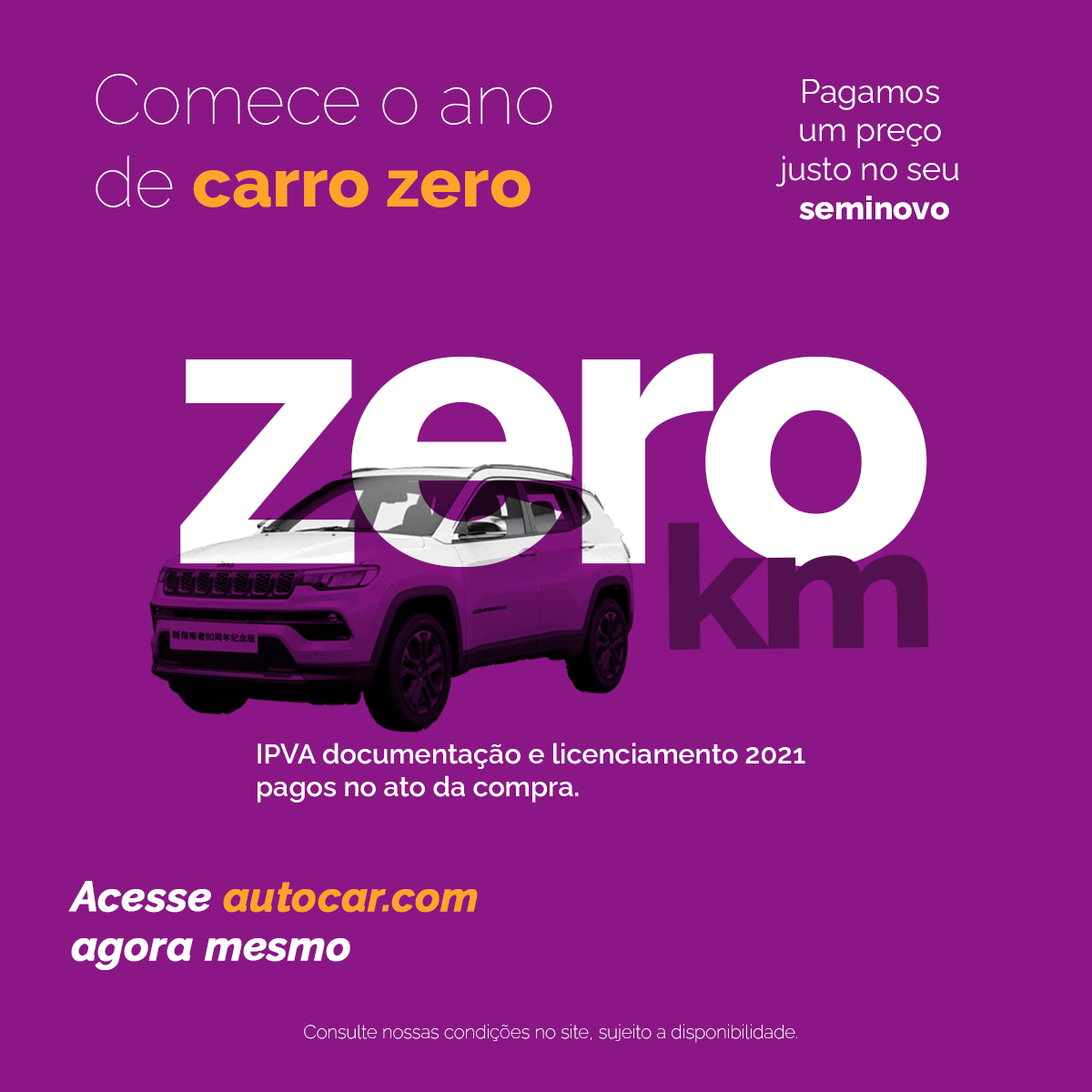
<style>
.page{position:relative;width:1092px;height:1092px;background:#8a1785}
.page>*{position:absolute;margin:0}
.t1{font:69.3px "Raleway-Thin";color:#ffffff}
.t2{font:69.3px "Raleway-ExtraBold";color:#ffa429}
.t3{font:32.4px "Raleway-Regular";color:#fefefe}
.t4{font:32.4px "Raleway-ExtraBold";color:#fefefe}
.t5{font:393px "Raleway-ExtraBold";letter-spacing:-0.05em;color:#ffffff}
.t6{font:173.5px "Raleway-ExtraBold";letter-spacing:-0.05em;color:#541152;scale:1.11 1}
.t7{font:27.7px "Raleway-SemiBold";color:#ffffff}
.t8{font:41.6px "Raleway-BoldItalic";color:#ffa429;font-weight:bold}
.t9{font:41.6px "Raleway-BoldItalic";color:#ffffff;font-weight:bold}
.t10{font:18.5px "Raleway-Thin";color:#fefefe}
</style>
<div class="page">
<p class="t1" style="left:96px;top:74px;width:456px;height:133px">Comece o ano <br>de <span class="t2">carro zero</span></p>
<p class="t3" style="left:775px;top:79px;width:184px;height:141px;text-align:center">Pagamos <br>um preço <br>justo no seu <br><span class="t4">seminovo</span></p>
<p class="t5" style="left:180px;top:353px;width:747px;height:214px">zero</p>
<p class="t6" style="left:668px;top:522px;width:261px;height:128px;rotate:-1deg">km</p>
<p class="t7" style="left:258px;top:743px;width:547px;height:60px">IPVA documentação e licenciamento 2021<br>pagos no ato da compra.</p>
<p class="t8" style="left:68px;top:881px;width:410px;height:89px"><span class="t9">Acesse </span>autocar.com<span class="t9"> <br>agora mesmo</span></p>
<p class="t10" style="left:304px;top:1024px;width:493px;height:19px">Consulte nossas condições no site, sujeito a disponibilidade.</p>
</div>
